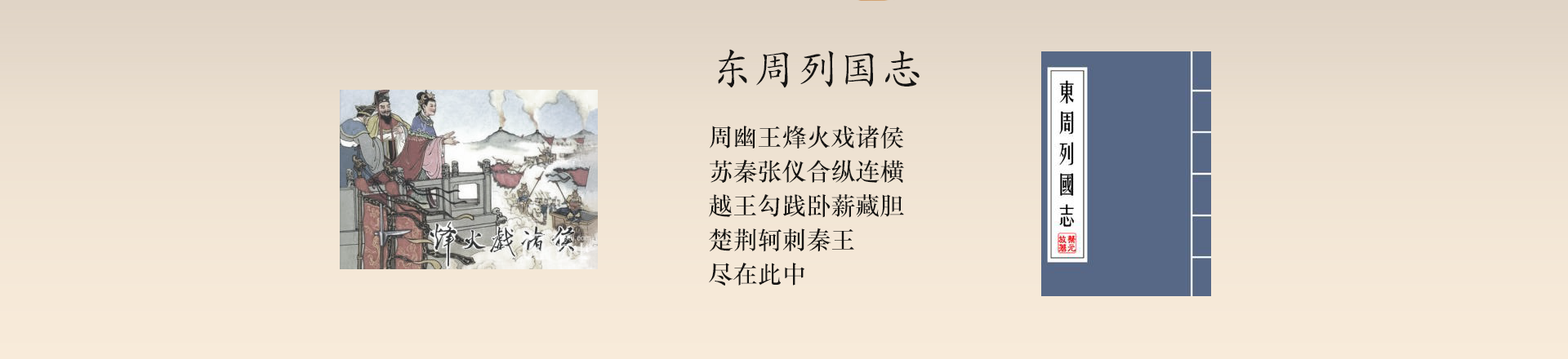
<style>
.page{position:relative;width:1568px;height:359px}
.page>*{position:absolute;margin:0}
.t1{font:42.5px "STKaiti";color:#161514}
.t2{font:24.5px/34.3px "STZhongsong";color:#161514}
</style>
<div class="page">
<p class="t1" style="left:718px;top:49px;width:202px;height:39px">东周列国志</p>
<p class="t2" style="left:709px;top:125px;width:195px;height:161px">周幽王烽火戏诸侯<br>苏秦张仪合纵连横<br>越王勾践卧薪藏胆<br>楚荆轲刺秦王<br>尽在此中</p>
</div>
